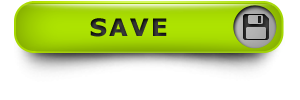
<style>
.page{position:relative;width:300px;height:100px;background:#ffffff}
.page>*{position:absolute;margin:0}
.t1{font:24px "Tahoma-Bold";letter-spacing:0.1em;color:#292929;text-transform:uppercase;scale:1.11 1}
</style>
<div class="page">
<p class="t1" style="left:90px;top:18px;width:77px;height:19px">Save</p>
</div>
